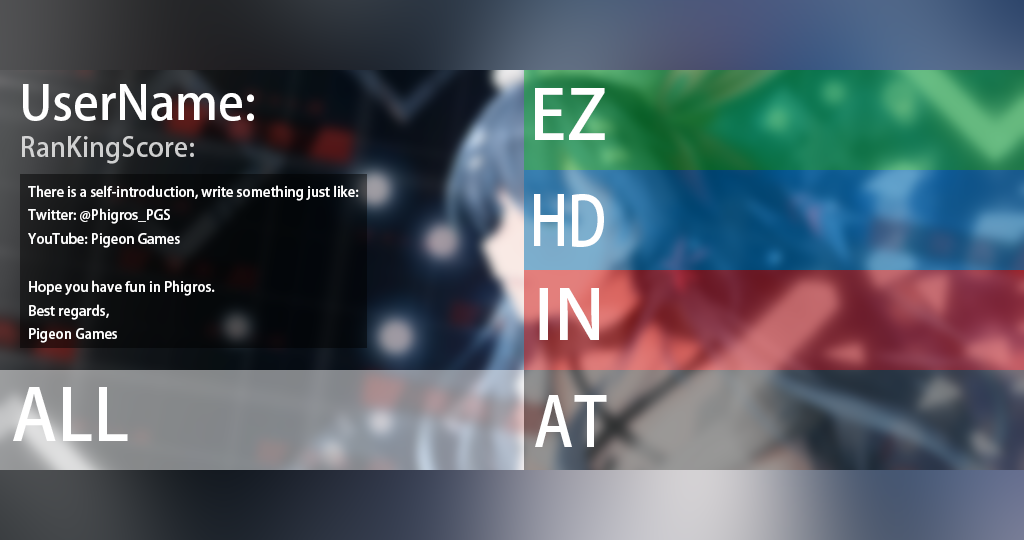
<style>
.page{position:relative;width:1024px;height:540px}
.page>*{position:absolute;margin:0}
.t1{font:47.6px "MyriadPro-Regular";color:#ffffff}
.t2{font:68.4px "MyriadPro-Regular";color:#ffffff}
.t3{font:26.6px "MyriadPro-Regular";color:#d0d0d0}
.t4{font:13.6px "MyriadPro-Regular";color:#ffffff}
.t5{font:68.4px "MyriadPro-Regular";color:#ffffff;scale:0.79 1}
.t6{font:68.4px "MyriadPro-Regular";color:#ffffff;scale:1.04 1}
.t7{font:69.9px "MyriadPro-Regular";color:#ffffff}
.t8{font:68.4px "MyriadPro-Regular";color:#ffffff;scale:0.89 1}
</style>
<div class="page">
<p class="t1" style="left:23px;top:84px;width:231px;height:37px">UserName:</p>
<p class="t2" style="left:535px;top:88px;width:70px;height:52px">EZ</p>
<p class="t3" style="left:22px;top:136px;width:172px;height:28px">RanKingScore:</p>
<p class="t4" style="left:28px;top:185px;width:331px;height:158px">There is a self-introduction, write something just like:<br>Twitter: @Phigros_PGS<br>YouTube: Pigeon Games<br><br>Hope you have fun in Phigros.<br>Best regards,<br>Pigeon Games</p>
<p class="t5" style="left:534px;top:194px;width:70px;height:53px">HD</p>
<p class="t6" style="left:539px;top:288px;width:60px;height:52px">IN</p>
<p class="t7" style="left:13px;top:387px;width:115px;height:54px">ALL</p>
<p class="t8" style="left:535px;top:395px;width:72px;height:52px">AT</p>
</div>
